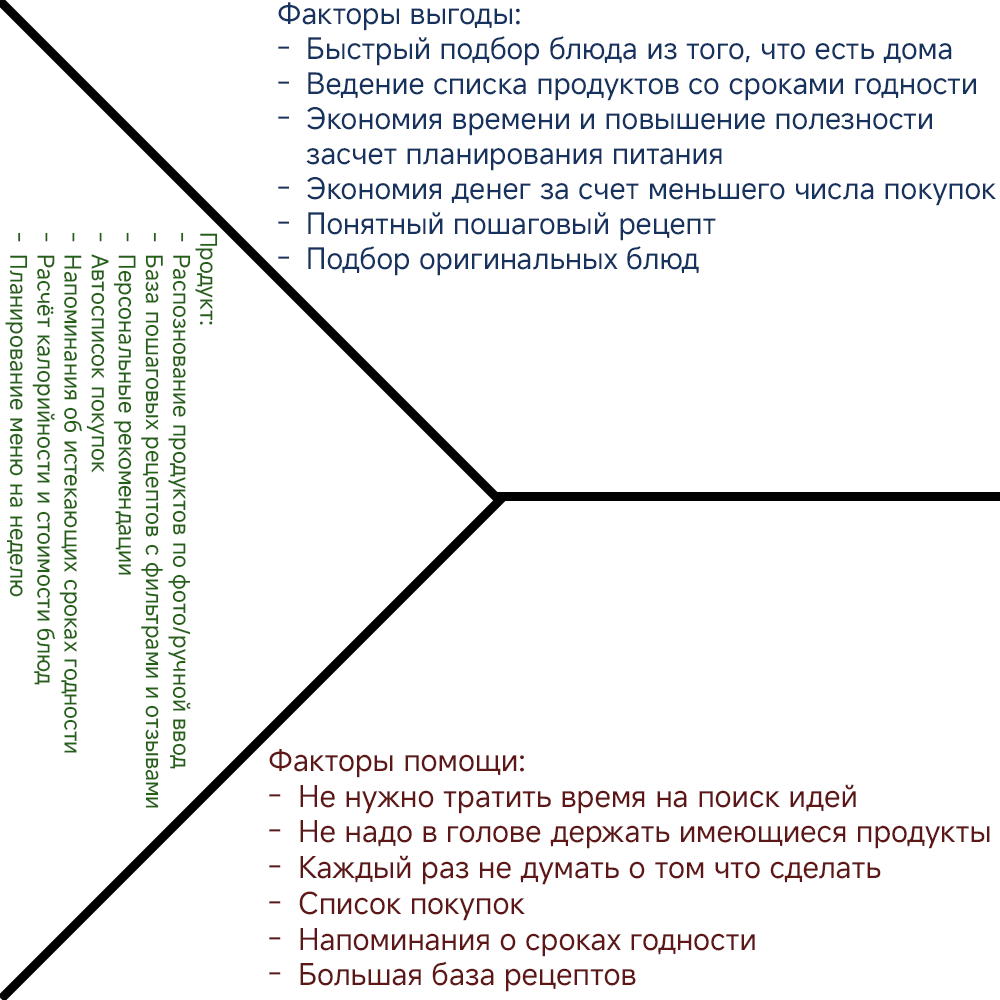
<style>
.page{position:relative;width:1000px;height:1000px;background:#ffffff}
.page>*{position:absolute;margin:0}
.t1{font:29.2px "MiSansLatin-Regular";color:#16335f}
.t2{font:22.6px "MiSansLatin-Regular";color:#245f16}
.t3{font:29.8px "MiSansLatin-Regular";color:#5f1616}
</style>
<div class="page">
<p class="t1" style="left:278px;top:2px;width:718px;height:274px">Факторы выгоды:<br>Быстрый подбор блюда из того, что есть дома<br>Ведение списка продуктов со сроками годности<br>Экономия времени и повышение полезности<br>засчет планирования питания<br>Экономия денег за счет меньшего числа покупок<br>Понятный пошаговый рецепт<br>Подбор оригинальных блюд</p>
<p class="t2" style="left:5px;top:232px;width:213px;height:576px;rotate:90deg">Продукт:<br>Распознование продуктов по фото/ручной ввод<br>База пошаговых рецептов с фильтрами и отзывами<br>Персональные рекомендации<br>Автосписок покупок<br>Напоминания об истекающих сроках годности<br>Расчёт калорийности и стоимости блюд<br>Планирование меню на неделю</p>
<p class="t3" style="left:269px;top:749px;width:721px;height:243px">Факторы помощи:<br>Не нужно тратить время на поиск идей<br>Не надо в голове держать имеющиеся продукты<br>Каждый раз не думать о том что сделать<br>Список покупок<br>Напоминания о сроках годности<br>Большая база рецептов</p>
</div>
